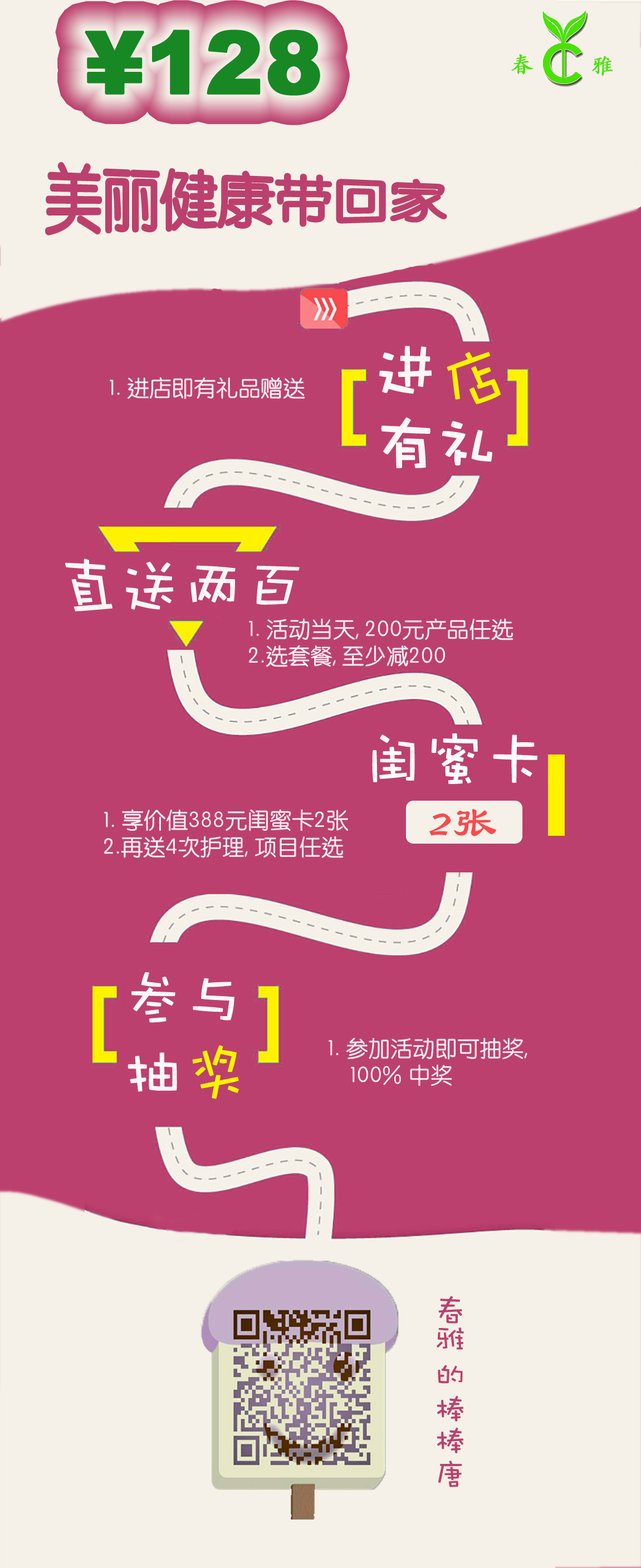
<style>
.page{position:relative;width:641px;height:1568px;background:#bc406d}
.page>*{position:absolute;margin:0}
.t1{font:86.2px "Arial-Black";color:#178824;font-weight:bold}
.t2{font:22.3px "STKaitiSC-Regular";color:#48e303;font-weight:bold}
.t3{font:57.4px "STYuanti-TC-Regular";color:#bc406d}
.t4{font:62.2px "DFWaWaSC-W5";color:#fbf7f7;font-variant:small-caps;font-weight:bold}
.t5{font:66.6px "DFWaWaSC-W5";color:#fef200;font-variant:small-caps}
.t6{font:22.3px "STYuanti-TC-Regular";color:#faecf1}
.t7{font:62.2px "DFWaWaSC-W5";color:#fbf7f7;font-variant:small-caps}
.t8{font:62.2px "DFWaWaSC-W5";color:#fcfcfa;font-variant:small-caps}
.t9{font:44.4px "STBaoliTC-Regular";color:#f74a4e;font-variant:small-caps}
.t10{font:62.2px "DFWaWaSC-W5";color:#fcf8f9;font-variant:small-caps}
.t11{font:62.2px "DFWaWaSC-W5";color:#fef200;font-variant:small-caps}
.t12{font:31.9px "DFWaWaSC-W5";color:#bc406d;font-variant:small-caps}
</style>
<div class="page">
<p class="t1" style="left:85px;top:30px;width:235px;height:66px">¥128</p>
<p class="t2" style="left:511px;top:54px;width:22px;height:21px">春</p>
<p class="t2" style="left:591px;top:56px;width:22px;height:20px">雅</p>
<p class="t3" style="left:46px;top:163px;width:400px;height:71px">美丽健康带回家</p>
<p class="t4" style="left:379px;top:346px;width:113px;height:122px">进<br>有礼</p>
<p class="t5" style="left:447px;top:352px;width:54px;height:52px;rotate:-21deg">店</p>
<p class="t6" style="left:110px;top:377px;width:195px;height:22px">1. 进店即有礼品赠送</p>
<p class="t7" style="left:65px;top:558px;width:235px;height:53px">直送两百</p>
<p class="t6" style="left:248px;top:618px;width:265px;height:49px">1. 活动当天, 200元产品任选<br>2.选套餐, 至少减200</p>
<p class="t8" style="left:372px;top:733px;width:165px;height:51px">闺蜜卡</p>
<p class="t6" style="left:104px;top:809px;width:245px;height:49px">1. 享价值388元闺蜜卡2张<br>2.再送4次护理, 项目任选</p>
<p class="t9" style="left:429px;top:809px;width:68px;height:27px">2张</p>
<p class="t10" style="left:128px;top:972px;width:106px;height:120px">参与<br>抽</p>
<p class="t6" style="left:329px;top:1037px;width:198px;height:49px">1. 参加活动即可抽奖,<br>    100% 中奖</p>
<p class="t11" style="left:192px;top:1045px;width:47px;height:54px;rotate:-14deg">奖</p>
<p class="t12" style="left:436px;top:1296px;width:28px;height:191px">春雅   的棒棒唐</p>
</div>
